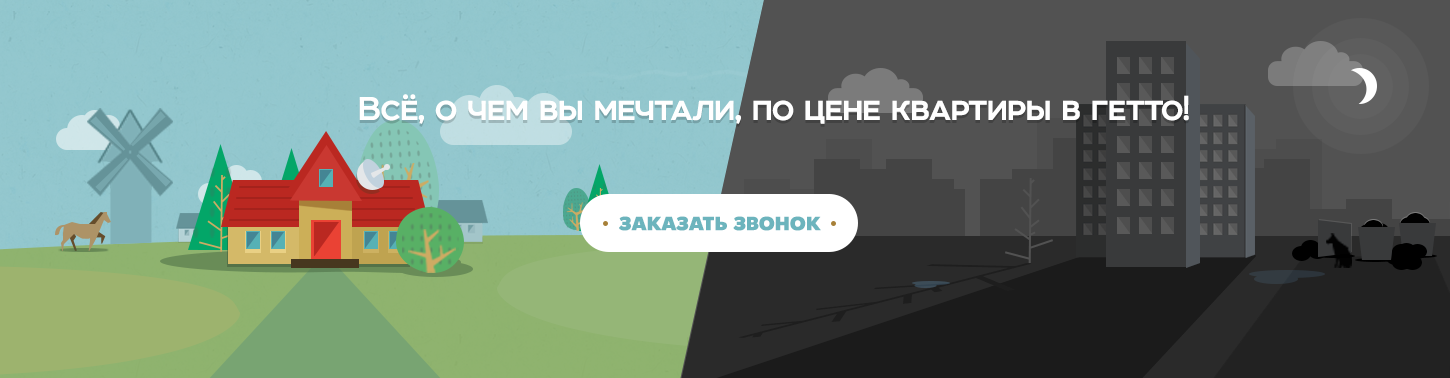
<style>
.page{position:relative;width:1450px;height:378px}
.page>*{position:absolute;margin:0}
.t1{font:38px "Room-Bold";letter-spacing:-0.025em}
.t2{font:38px "Room-Bold";letter-spacing:-0.025em;color:#ffffff}
.t3{font:20.3px "OsnovaPro-Heavy";letter-spacing:-0.025em;color:#6cb4bd;font-weight:bold}
</style>
<div class="page">
<p class="t1" style="left:359px;top:97px;width:830px;height:30px">Всё, о чем вы мечтали, по цене квартиры в гетто!</p>
<p class="t2" style="left:359px;top:94px;width:830px;height:30px">Всё, о чем вы мечтали, по цене квартиры в гетто!</p>
<p class="t3" style="left:619px;top:216px;width:202px;height:15px">ЗАКАЗАТЬ ЗВОНОК</p>
</div>
